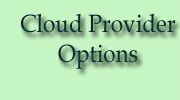
<style>
.page{position:relative;width:180px;height:100px;background:#c5f5c2}
.page>*{position:absolute;margin:0}
.t1{font:25px "BookAntiqua";color:#05302b;scale:0.9 1}
</style>
<div class="page">
<p class="t1" style="left:21px;top:13px;width:155px;height:56px;text-align:center">Cloud Provider <br>Options</p>
</div>
